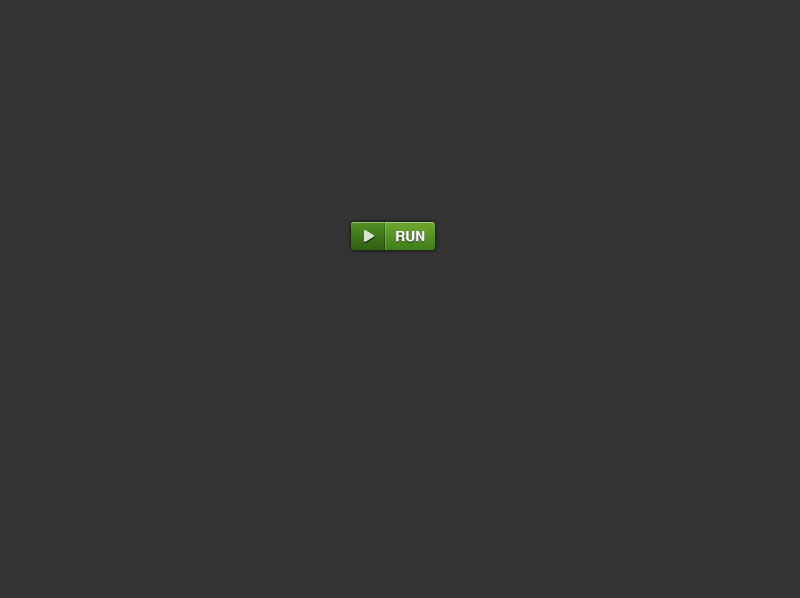
<style>
.page{position:relative;width:800px;height:598px;background:#333333}
.page>*{position:absolute;margin:0}
.t1{font:14px "Helvetica-Bold";color:#ffffff}
</style>
<div class="page">
<p class="t1" style="left:396px;top:231px;width:29px;height:11px">RUN</p>
</div>
